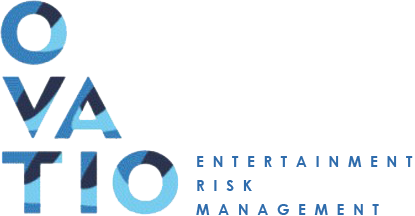
<style>
.page{position:relative;width:415px;height:216px;background:#ffffff}
.page>*{position:absolute;margin:0}
.t1{font:14.7px/24px "CenturyGothic-Bold";letter-spacing:0.6em;color:#2f6cac}
</style>
<div class="page">
<p class="t1" style="left:196px;top:156px;width:217px;height:59px">ENTERTAINMENT<br>RISK<br>MANAGEMENT</p>
</div>
